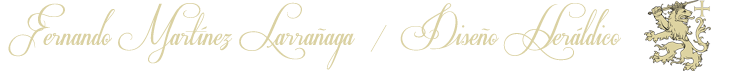
<style>
.page{position:relative;width:743px;height:71px;background:#ffffff}
.page>*{position:absolute;margin:0}
.t1{font:40px "Respective";color:#dad1a2}
</style>
<div class="page">
<p class="t1" style="left:8px;top:2px;width:347px;height:68px">Fernando Martínez Larrañaga</p>
<p class="t1" style="left:370px;top:3px;width:251px;height:58px">/  Diseño Heráldico</p>
</div>
